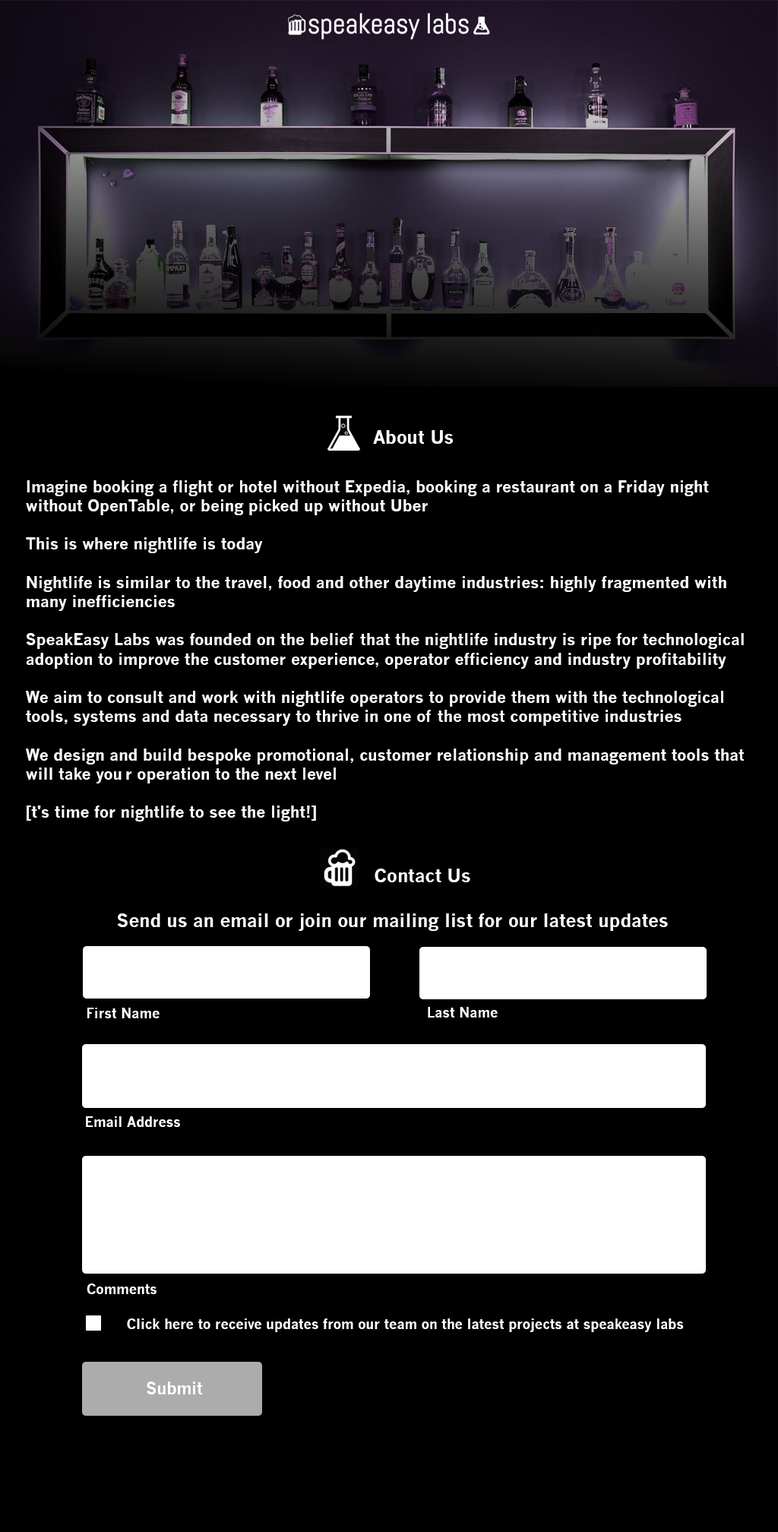
<style>
.page{position:relative;width:778px;height:1532px;background:#000000}
.page>*{position:absolute;margin:0}
.t1{font:18.2px "NewsGothicMT-Bold";color:#ffffff}
.t2{font:16px "NewsGothicMT-Bold";color:#ffffff}
.t3{font:13.7px "NewsGothicMT-Bold";color:#ffffff}
.t4{font:16.7px "NewsGothicMT-Bold";letter-spacing:-0.02em;color:#ffffff}
.t5{font:16.7px "NewsGothicMT-Bold";color:#ffffff}
</style>
<div class="page">
<p class="t1" style="left:373px;top:430px;width:80px;height:14px">About Us</p>
<p class="t2" style="left:26px;top:480px;width:718px;height:342px">Imagine booking a flight or hotel without Expedia, booking a restaurant on a Friday night <br>without OpenTable, or being picked up without Uber<br><br>This is where nightlife is today<br><br>Nightlife is similar to the travel, food and other daytime industries: highly fragmented with <br>many inefficiencies<br><br>SpeakEasy Labs was founded on the belief that the nightlife industry is ripe for technological <br>adoption to improve the customer experience, operator efficiency and industry profitability<br><br>We aim to consult and work with nightlife operators to provide them with the technological <br>tools, systems and data necessary to thrive in one of the most competitive industries<br><br>We design and build bespoke promotional, customer relationship and management tools that <br>will take your operation to the next level<br><br>[t's time for nightlife to see the light!]</p>
<p class="t1" style="left:375px;top:869px;width:95px;height:13px">Contact Us</p>
<p class="t1" style="left:117px;top:914px;width:551px;height:17px">Send us an email or join our mailing list for our latest updates</p>
<p class="t3" style="left:87px;top:1008px;width:73px;height:10px">First Name</p>
<p class="t3" style="left:428px;top:1007px;width:70px;height:11px">Last Name</p>
<p class="t3" style="left:86px;top:1116px;width:94px;height:11px">Email Address</p>
<p class="t3" style="left:87px;top:1284px;width:70px;height:10px">Comments</p>
<p class="t3" style="left:127px;top:1319px;width:557px;height:13px">Click here to receive updates from our team on the latest projects at speakeasy labs</p>
<p class="t4" style="left:147px;top:1382px;width:56px;height:13px"><span class="t5">S</span>ubmit</p>
</div>
